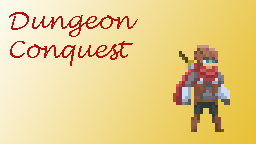
<style>
.page{position:relative;width:256px;height:144px}
.page>*{position:absolute;margin:0}
.t1{font:24px "LucidaHandwriting-Italic";color:#b21010}
</style>
<div class="page">
<p class="t1" style="left:9px;top:12px;width:129px;height:54px">Dungeon Conquest</p>
</div>
